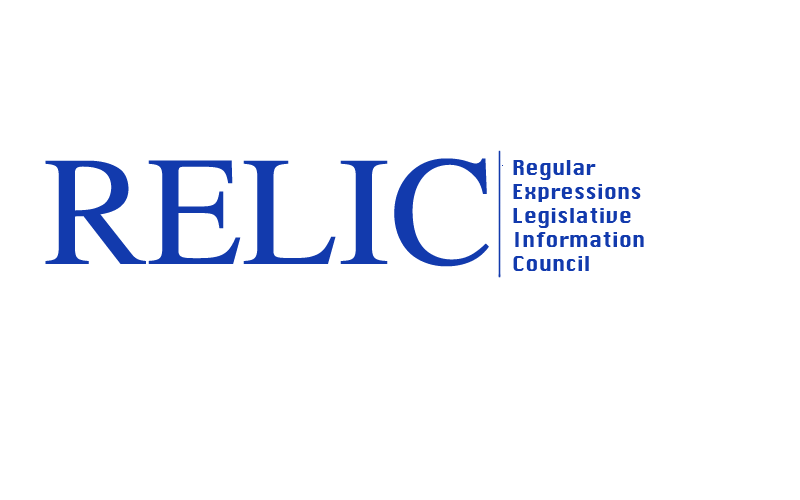
<style>
.page{position:relative;width:800px;height:500px;background:#ffffff}
.page>*{position:absolute;margin:0}
.t1{font:156px "STIXGeneral-Regular";color:#123aad}
.t2{font:20px "Krungthep";color:#123aad}
</style>
<div class="page">
<p class="t1" style="left:45px;top:158px;width:444px;height:109px">RELIC</p>
<p class="t2" style="left:513px;top:160px;width:131px;height:111px">Regular<br>Expressions<br>Legislative<br>Information<br>Council</p>
</div>
